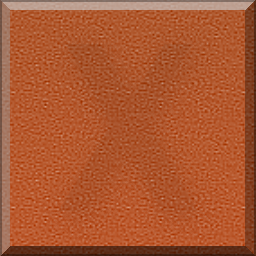
<style>
.page{position:relative;width:256px;height:256px}
.page>*{position:absolute;margin:0}
.t1{font:250px "FranklinGothic-Medium";color:#aa532b}
</style>
<div class="page">
<p class="t1" style="left:58px;top:44px;width:140px;height:167px">X</p>
</div>
